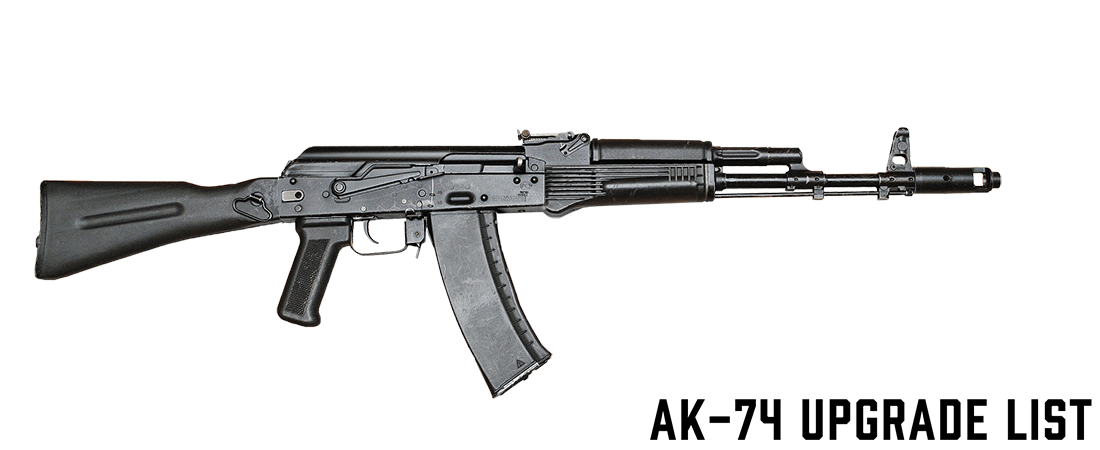
<style>
.page{position:relative;width:1100px;height:450px;background:#ffffff}
.page>*{position:absolute;margin:0}
.t1{font:53.4px "Prohibition-Regular";letter-spacing:0.04em;color:#000000}
</style>
<div class="page">
<p class="t1" style="left:650px;top:399px;width:442px;height:41px">AK-74 Upgrade List</p>
</div>
